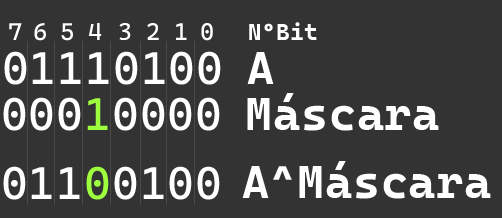
<style>
.page{position:relative;width:502px;height:218px;background:#333333}
.page>*{position:absolute;margin:0}
.t1{font:24.2px "CascadiaCode-Roman";letter-spacing:0.02em;color:#ffffff}
.t2{font:23.3px "CascadiaCodeRoman-Bold";letter-spacing:0.02em;color:#ffffff}
.t3{font:45.8px "CascadiaCode-Roman";letter-spacing:0.02em;color:#ffffff}
.t4{font:45.8px "CascadiaCodeRoman-Bold";letter-spacing:0.02em;color:#ffffff}
.t5{font:45.8px "CascadiaCode-Roman";letter-spacing:0.02em;color:#9dff3d}
</style>
<div class="page">
<p class="t1" style="left:9px;top:23px;width:13px;height:17px">7</p>
<p class="t1" style="left:34px;top:23px;width:12px;height:18px">6</p>
<p class="t1" style="left:61px;top:23px;width:12px;height:18px">5</p>
<p class="t1" style="left:88px;top:23px;width:14px;height:17px">4</p>
<p class="t1" style="left:119px;top:23px;width:12px;height:17px">3</p>
<p class="t1" style="left:147px;top:23px;width:12px;height:17px">2</p>
<p class="t1" style="left:176px;top:23px;width:11px;height:17px">1</p>
<p class="t1" style="left:201px;top:23px;width:12px;height:18px">0</p>
<p class="t2" style="left:249px;top:22px;width:68px;height:18px">NºBit</p>
<p class="t3" style="left:4px;top:51px;width:217px;height:34px">01110100</p>
<p class="t4" style="left:247px;top:52px;width:27px;height:32px">A</p>
<p class="t3" style="left:3px;top:97px;width:217px;height:34px">000<span class="t5">1</span>0000</p>
<p class="t4" style="left:247px;top:93px;width:192px;height:38px">Máscara</p>
<p class="t4" style="left:242px;top:161px;width:249px;height:38px">A^Máscara</p>
<p class="t3" style="left:3px;top:166px;width:217px;height:34px">011<span class="t5">0</span>0100</p>
</div>
